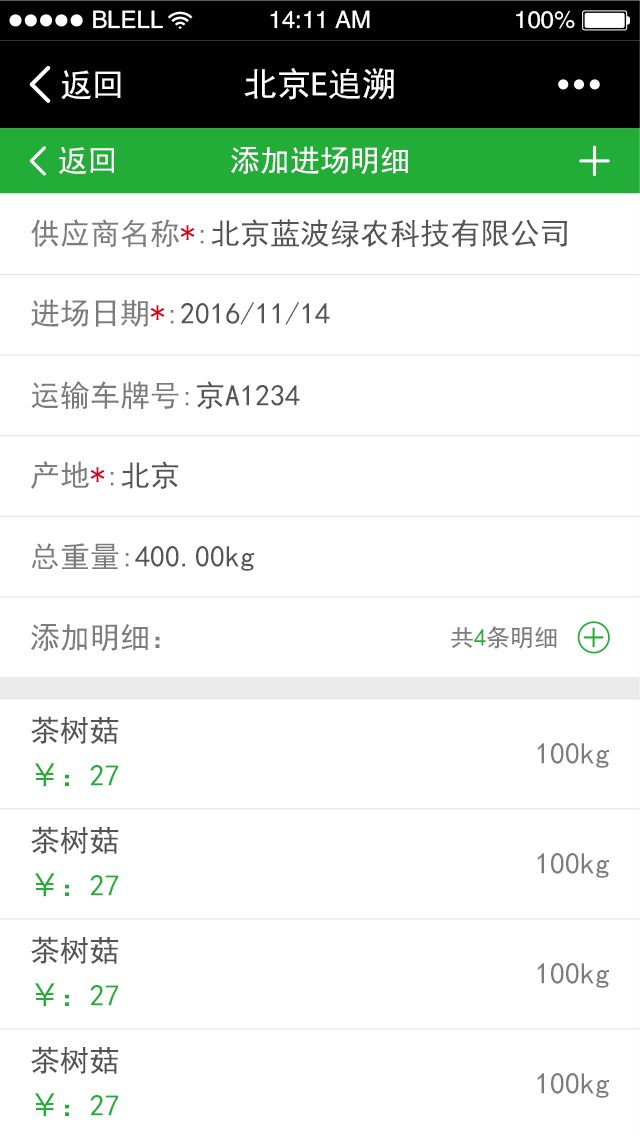
<style>
.page{position:relative;width:640px;height:1136px;background:#ffffff}
.page>*{position:absolute;margin:0}
.t1{font:24px "FZHTJW--GB1-0";color:#ffffff}
.t2{font:32px "SimHei";color:#ffffff}
.t3{font:34px "SimHei";color:#ffffff}
.t4{font:30px "SimHei";color:#ffffff}
.t5{font:30px "SimHei";color:#545454}
.t6{font:30px "SimHei";color:#7c7c7c}
.t7{font:30px "SimHei";color:#d8001a}
.t8{font:24px "SimHei";color:#7c7c7c}
.t9{font:24px "SimHei";color:#22ac38}
.t10{font:30px/45px "SimHei";color:#545454}
.t11{font:30px/45px "HiraginoSansGB-W3";color:#22ac38}
.t12{font:30px/45px "SimHei";color:#22ac38}
</style>
<div class="page">
<p class="t1" style="left:93px;top:10px;width:70px;height:19px">BLELL</p>
<p class="t1" style="left:270px;top:10px;width:100px;height:19px">14:11 AM</p>
<p class="t1" style="left:516px;top:10px;width:59px;height:19px">100%</p>
<p class="t2" style="left:61px;top:70px;width:60px;height:30px">返回</p>
<p class="t3" style="left:244px;top:68px;width:150px;height:32px">北京E追溯</p>
<p class="t4" style="left:59px;top:147px;width:55px;height:27px">返回</p>
<p class="t4" style="left:231px;top:146px;width:177px;height:29px">添加进场明细</p>
<p class="t5" style="left:31px;top:219px;width:536px;height:29px"><span class="t6">供应商名称</span><span class="t7">*</span><span class="t6">:</span>北京蓝波绿农科技有限公司</p>
<p class="t5" style="left:31px;top:299px;width:299px;height:28px"><span class="t6">进场日期</span><span class="t7">*</span><span class="t6">:</span>2016/11/14</p>
<p class="t6" style="left:31px;top:381px;width:269px;height:29px">运输车牌号:<span class="t5">京A1234</span></p>
<p class="t6" style="left:31px;top:461px;width:148px;height:28px">产地<span class="t7">*</span>:<span class="t5">北京</span></p>
<p class="t5" style="left:31px;top:543px;width:223px;height:28px"><span class="t6">总重量:</span>400.00kg</p>
<p class="t6" style="left:31px;top:624px;width:129px;height:28px">添加明细：</p>
<p class="t8" style="left:451px;top:626px;width:106px;height:23px">共<span class="t9">4</span>条明细</p>
<p class="t10" style="left:31px;top:716px;width:88px;height:71px">茶树菇<br><span class="t11">￥</span><span class="t12">：27</span></p>
<p class="t6" style="left:537px;top:743px;width:72px;height:25px">100kg</p>
<p class="t10" style="left:31px;top:826px;width:88px;height:71px">茶树菇<br><span class="t11">￥</span><span class="t12">：27</span></p>
<p class="t6" style="left:537px;top:853px;width:72px;height:25px">100kg</p>
<p class="t10" style="left:31px;top:936px;width:88px;height:71px">茶树菇<br><span class="t11">￥</span><span class="t12">：27</span></p>
<p class="t6" style="left:537px;top:963px;width:72px;height:25px">100kg</p>
<p class="t10" style="left:31px;top:1046px;width:88px;height:71px">茶树菇<br><span class="t11">￥</span><span class="t12">：27</span></p>
<p class="t6" style="left:537px;top:1073px;width:72px;height:25px">100kg</p>
</div>
